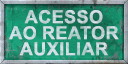
<style>
.page{position:relative;width:128px;height:64px}
.page>*{position:absolute;margin:0}
.t1{font:18px/16px "Arial-BoldMT";letter-spacing:-0.01em;color:#c6d7dd;text-transform:uppercase}
</style>
<div class="page">
<p class="t1" style="left:9px;top:10px;width:110px;height:46px;text-align:center">Acesso<br>ao reator<br>auxiliar</p>
</div>
